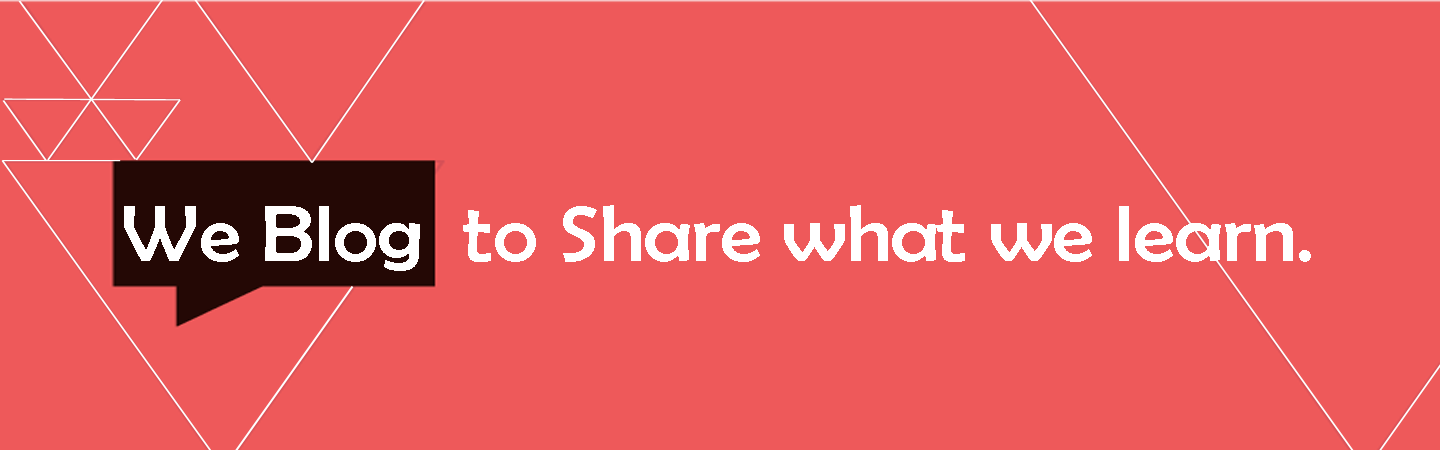
<style>
.page{position:relative;width:1440px;height:450px;background:#ee595a}
.page>*{position:absolute;margin:0}
.t1{font:80px "BerlinSansFB-Reg";letter-spacing:-0.01em;color:#ffffff;scale:1.1 1}
</style>
<div class="page">
<p class="t1" style="left:124px;top:205px;width:1187px;height:66px">We Blog  to Share what we learn.</p>
</div>
